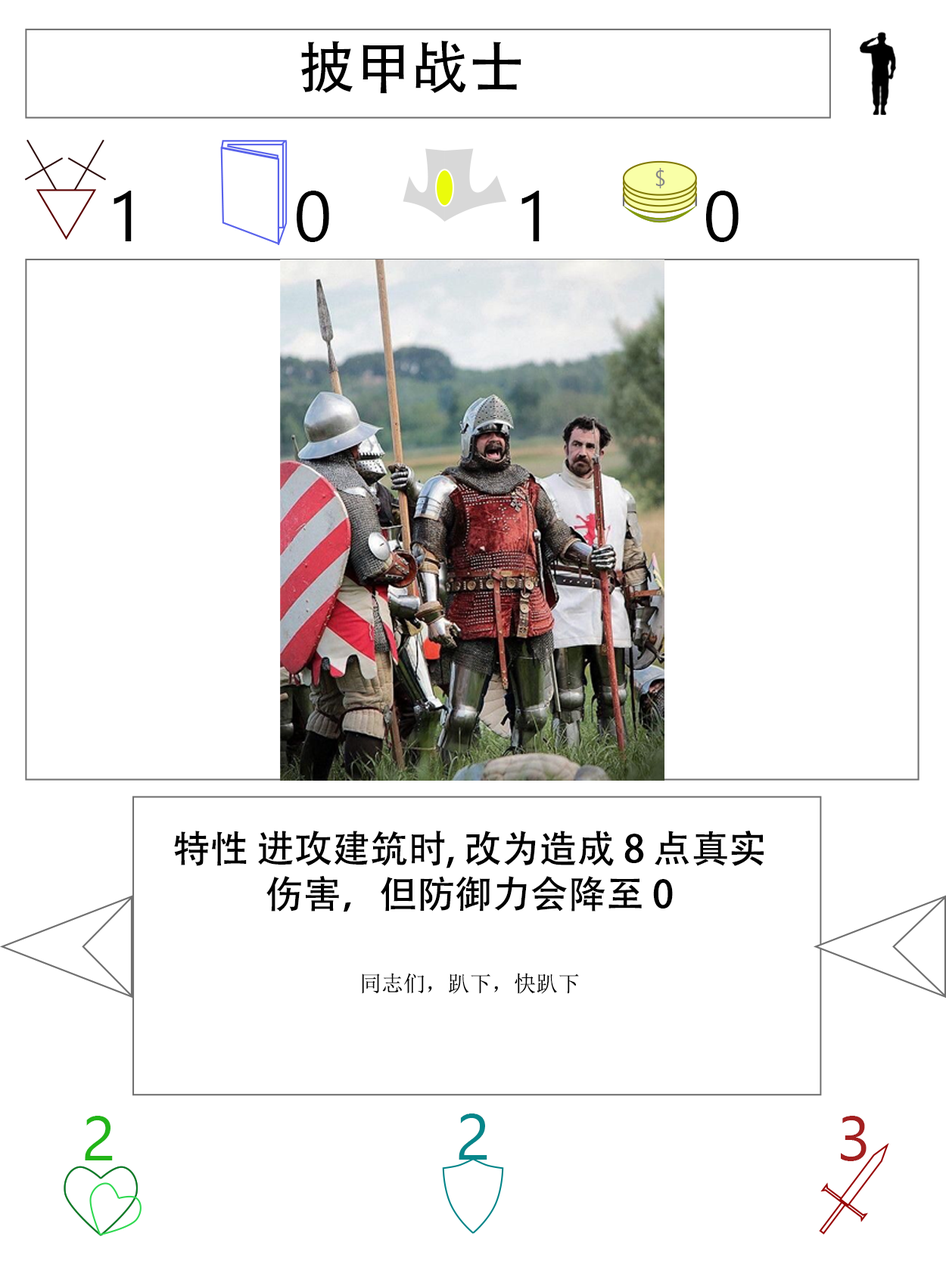
<style>
.page{position:relative;width:946px;height:1261px;background:#ffffff}
.page>*{position:absolute;margin:0}
.t1{font:56.7px "AdobeHeitiStd-Regular";color:#000000}
.t2{font:70.9px "SegoeUI";color:#000000}
.t3{font:37.8px "AdobeHeitiStd-Regular";color:#000000}
.t4{font:22.1px "NSimSun";color:#000000}
.t5{font:63px "SegoeUI";color:#22b518}
.t6{font:64.6px "SegoeUI";color:#05868a}
.t7{font:63px "SegoeUI";color:#a32020}
</style>
<div class="page">
<p class="t1" style="left:301px;top:40px;width:220px;height:54px">披甲战士</p>
<p class="t2" style="left:113px;top:191px;width:19px;height:50px">1</p>
<p class="t2" style="left:297px;top:191px;width:32px;height:51px">0</p>
<p class="t2" style="left:521px;top:191px;width:18px;height:50px">1</p>
<p class="t2" style="left:706px;top:191px;width:32px;height:51px">0</p>
<p class="t3" style="left:174px;top:831px;width:589px;height:163px;text-align:center">特性 进攻建筑时, 改为造成 8 点真实伤害，但防御力会降至 0<br><br><span class="t4">同志们，趴下，快趴下</span></p>
<p class="t5" style="left:85px;top:1116px;width:28px;height:44px">2</p>
<p class="t6" style="left:458px;top:1114px;width:29px;height:46px">2</p>
<p class="t7" style="left:840px;top:1116px;width:26px;height:45px">3</p>
</div>
